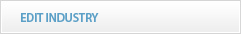
<style>
.page{position:relative;width:241px;height:34px}
.page>*{position:absolute;margin:0}
.t1{font:12px "MyriadPro-Semibold";letter-spacing:-0.01em;color:#5ca0c7;text-transform:uppercase}
</style>
<div class="page">
<p class="t1" style="left:21px;top:13px;width:78px;height:9px">EDIT INDUSTRY</p>
</div>
